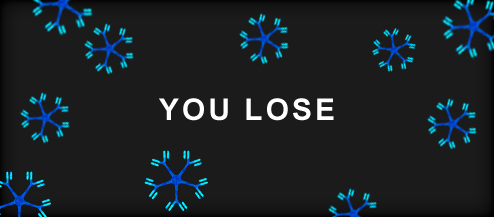
<style>
.page{position:relative;width:494px;height:217px;background:#1b1b1b}
.page>*{position:absolute;margin:0}
.t1{font:30px "Arial-BoldMT";letter-spacing:0.1em;color:#ffffff}
</style>
<div class="page">
<p class="t1" style="left:159px;top:98px;width:175px;height:23px">YOU LOSE</p>
</div>
